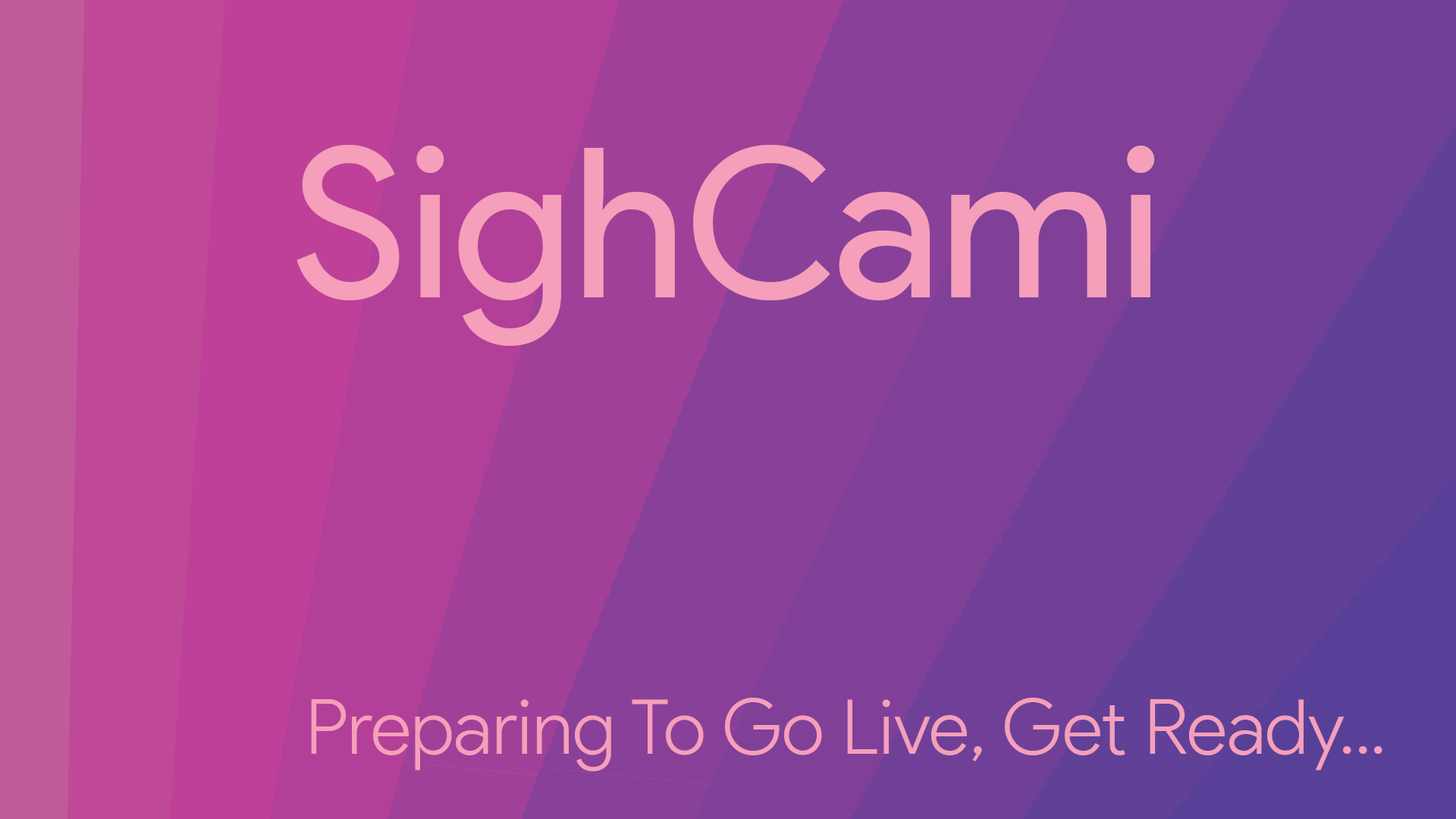
<style>
.page{position:relative;width:1456px;height:819px}
.page>*{position:absolute;margin:0}
.t1{font:208.5px "ProductSans-Regular";color:#f59fba}
.t2{font:75.8px "ProductSans-Light";color:#f59fba}
</style>
<div class="page">
<p class="t1" style="left:297px;top:144px;width:858px;height:202px">SighCami</p>
<p class="t2" style="left:311px;top:698px;width:1071px;height:73px">Preparing To Go Live, Get Ready...</p>
</div>
